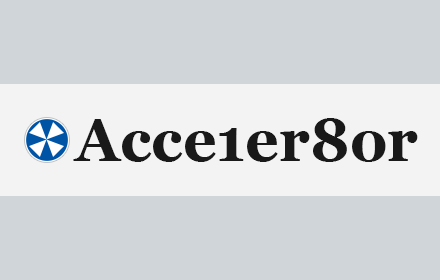
<style>
.page{position:relative;width:440px;height:280px;background:#d0d5d9}
.page>*{position:absolute;margin:0}
.t1{font:60px "Georgia-Bold";color:#191919}
</style>
<div class="page">
<p class="t1" style="left:73px;top:118px;width:345px;height:44px">Acce1er8or</p>
</div>
